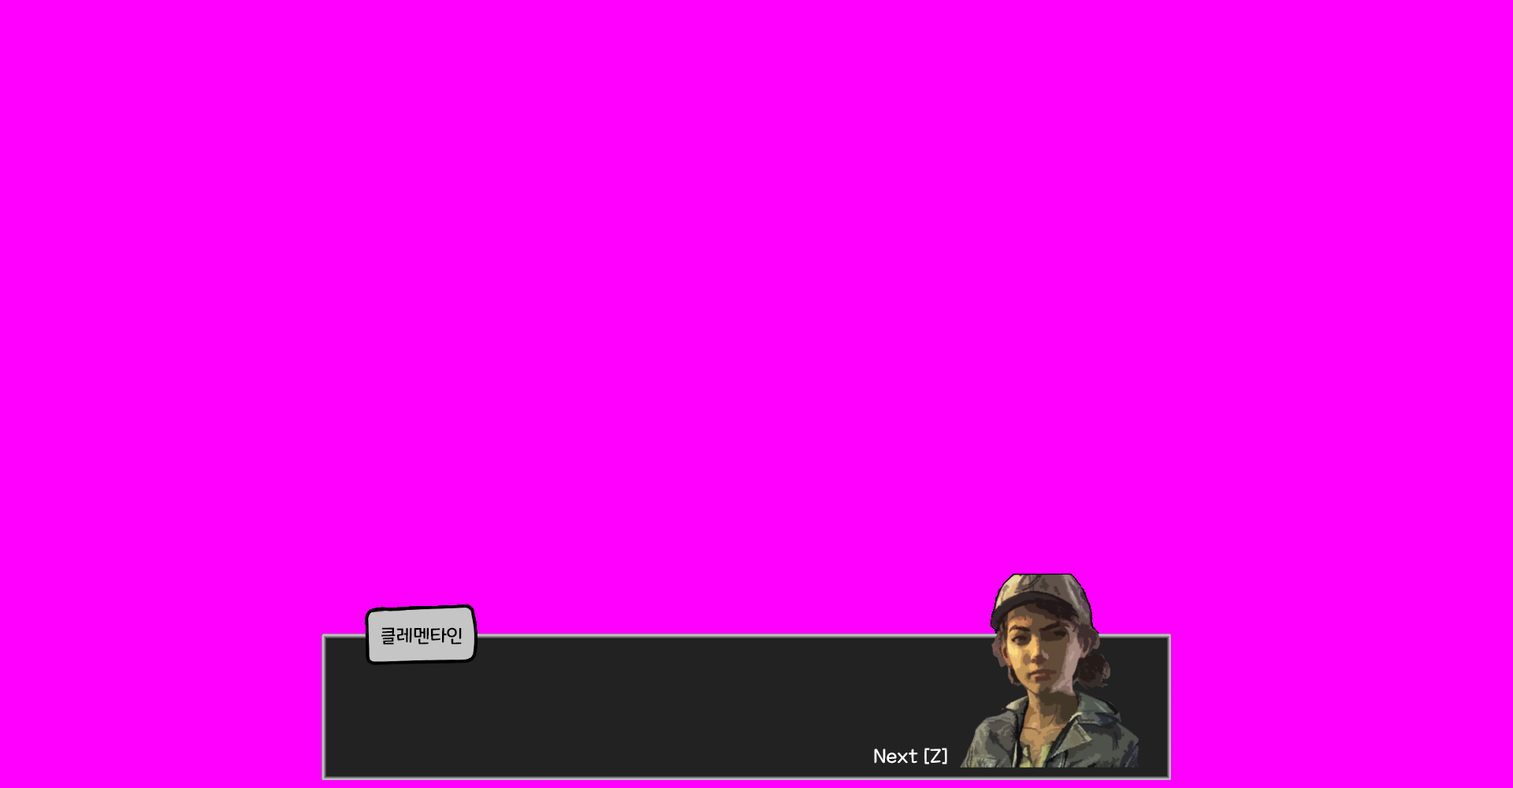
<style>
.page{position:relative;width:1513px;height:788px;background:#ff00ff}
.page>*{position:absolute;margin:0}
.t1{font:18.9px "MaplestoryLight";color:#000000}
.t2{font:18.9px "MaplestoryLight";color:#ffffff}
</style>
<div class="page">
<p class="t1" style="left:381px;top:627px;width:81px;height:18px">클레멘타인</p>
<p class="t2" style="left:874px;top:748px;width:73px;height:16px">Next [Z]</p>
</div>
